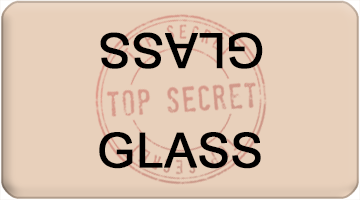
<style>
.page{position:relative;width:360px;height:200px;background:#e8d0bb}
.page>*{position:absolute;margin:0}
.t1{font:48px "ArialMT";color:#000000;font-weight:bold}
</style>
<div class="page">
<p class="t1" style="left:100px;top:32px;width:163px;height:37px;rotate:180deg">GLASS</p>
<p class="t1" style="left:99px;top:132px;width:162px;height:37px">GLASS</p>
</div>
